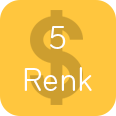
<style>
.page{position:relative;width:116px;height:116px;background:#ffc63e}
.page>*{position:absolute;margin:0}
.t1{font:35px "Bryant-RegularCondensed";color:#ffffff}
</style>
<div class="page">
<p class="t1" style="left:24px;top:26px;width:68px;height:65px;text-align:center">5<br>Renk</p>
</div>
